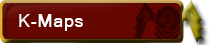
<style>
.page{position:relative;width:211px;height:45px;background:#650600}
.page>*{position:absolute;margin:0}
.t1{font:18px "MicrosoftSansSerif";letter-spacing:0.04em;color:#ffffff}
</style>
<div class="page">
<p class="t1" style="left:19px;top:14px;width:64px;height:17px">K-Maps</p>
</div>
